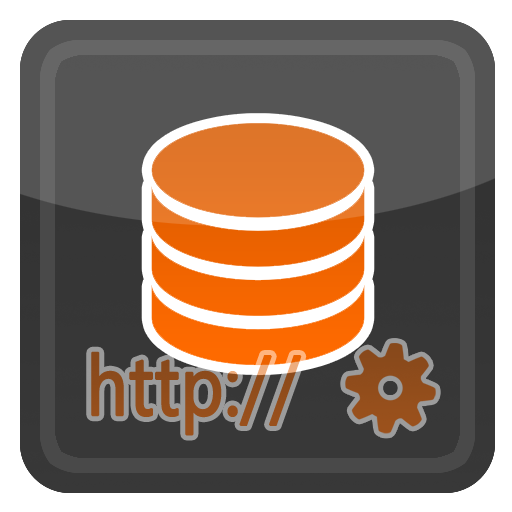
<style>
.page{position:relative;width:512px;height:512px}
.page>*{position:absolute;margin:0}
.t1{font:84px "SegoeWP";letter-spacing:-0.012em;color:#914d1c;font-weight:bold;scale:0.87 1}
</style>
<div class="page">
<p class="t1" style="left:91px;top:351px;width:211px;height:85px">http://</p>
</div>
